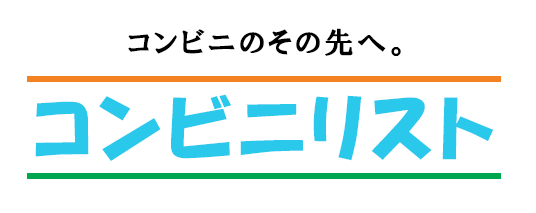
<style>
.page{position:relative;width:536px;height:213px;background:#ffffff}
.page>*{position:absolute;margin:0}
.t1{font:30px "HGPSoeiPresenceEB";letter-spacing:0.1em;color:#000000}
.t2{font:72px "HGPSoeiKakupoptai";letter-spacing:0.1em;color:#2ac9eb}
</style>
<div class="page">
<p class="t1" style="left:128px;top:28px;width:273px;height:28px">コンビニのその先へ。</p>
<p class="t2" style="left:35px;top:94px;width:459px;height:67px">コンビニリスト</p>
</div>
